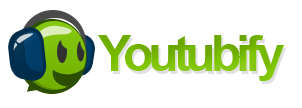
<style>
.page{position:relative;width:302px;height:108px;background:#ffffff}
.page>*{position:absolute;margin:0}
.t1{font:50px "Arial-BoldMT";letter-spacing:-0.1em;color:#7dc400}
</style>
<div class="page">
<p class="t1" style="left:98px;top:35px;width:186px;height:46px">Youtubify</p>
</div>
